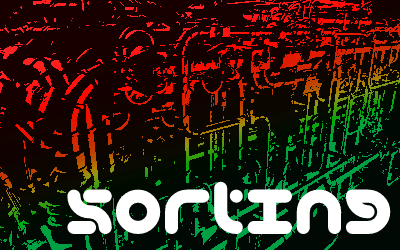
<style>
.page{position:relative;width:400px;height:250px}
.page>*{position:absolute;margin:0}
.t1{font:60px "TechniqueBRK";color:#ffffff}
</style>
<div class="page">
<p class="t1" style="left:67px;top:181px;width:324px;height:53px">Sorting</p>
</div>
